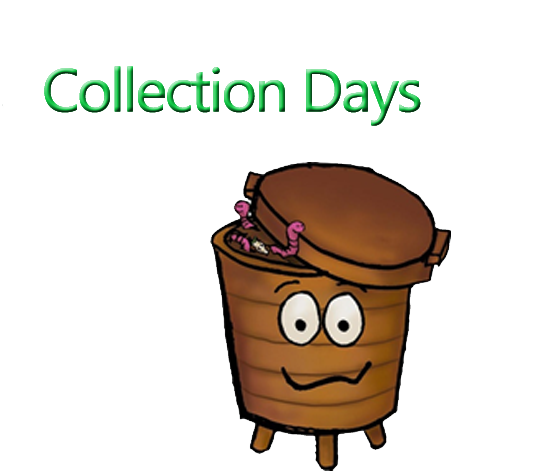
<style>
.page{position:relative;width:544px;height:475px;background:#ffffff}
.page>*{position:absolute;margin:0}
.t1{font:60px "MicrosoftNewTaiLue";letter-spacing:-0.06em;font-weight:bold}
</style>
<div class="page">
<p class="t1" style="left:44px;top:66px;width:377px;height:60px">Collection Days</p>
</div>
